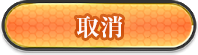
<style>
.page{position:relative;width:198px;height:55px}
.page>*{position:absolute;margin:0}
.t1{font:24px "RyuminPr6N-ExBold";color:#fffbf9}
</style>
<div class="page">
<p class="t1" style="left:76px;top:16px;width:47px;height:22px">取消</p>
</div>
